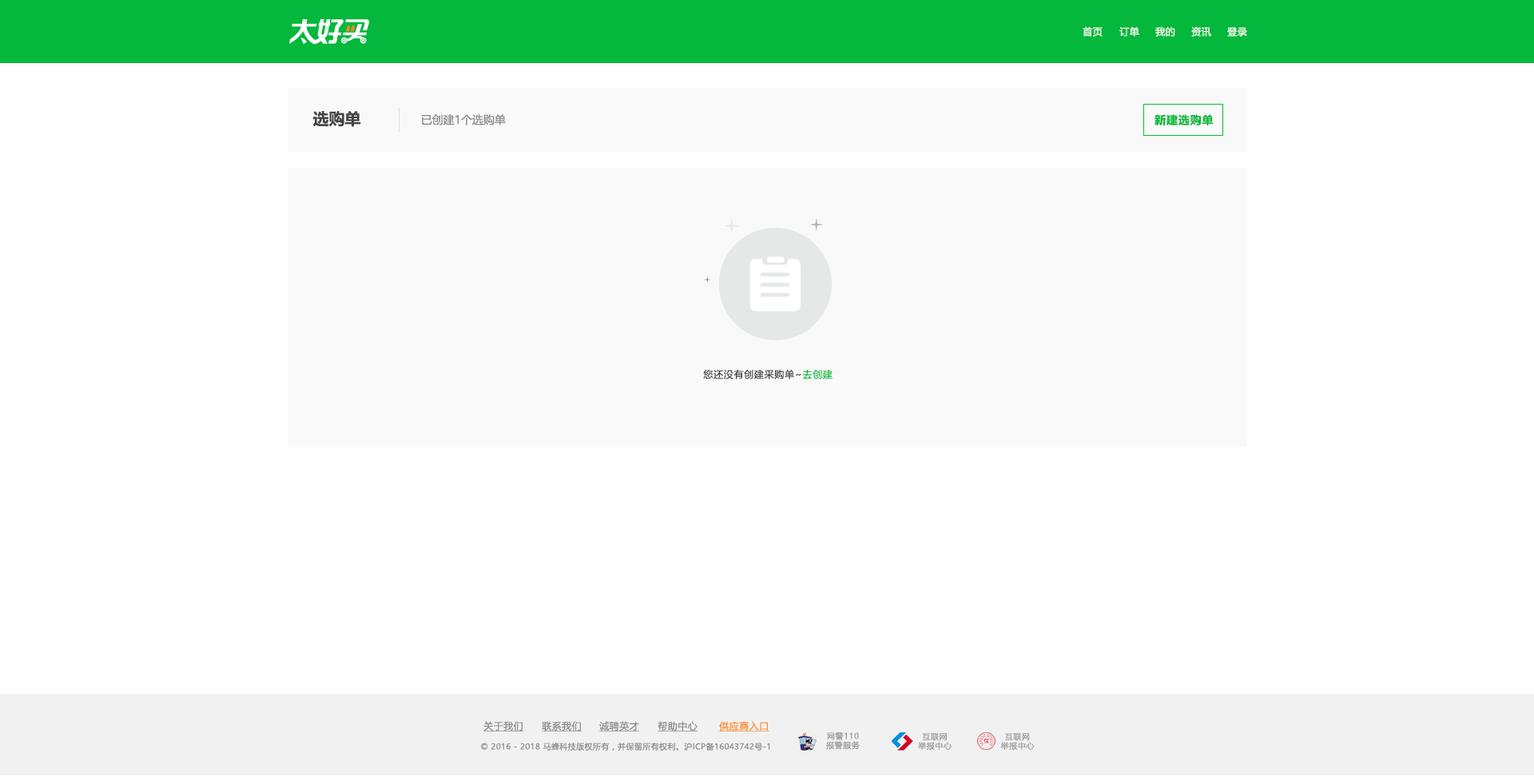
<style>
.page{position:relative;width:1534px;height:777px;background:#ffffff}
.page>*{position:absolute;margin:0}
.t1{font:9.6px "MicrosoftYaHeiUI";letter-spacing:0.04em;color:#ffffff}
.t2{font:16px "MicrosoftYaHeiUI-Bold";color:#444444}
.t3{font:11.2px "MicrosoftYaHeiUI";color:#888888}
.t4{font:11.2px "MicrosoftYaHeiUI-Bold";letter-spacing:0.06em;color:#04b83b}
.t5{font:9.6px "MicrosoftYaHeiUI";letter-spacing:0.06em;color:#444444}
.t6{font:9.6px "MicrosoftYaHeiUI";letter-spacing:0.06em;color:#04b83b}
.t7{font:9.6px "MicrosoftYaHeiUI";letter-spacing:0.04em;color:#8c8c8c;text-decoration:underline}
.t8{font:9.6px "MicrosoftYaHeiUI";letter-spacing:0.04em;color:#ff8b25;text-decoration:underline}
.t9{font:8px/9.3px "MicrosoftYaHei";letter-spacing:0.06em;color:#999999}
.t10{font:8px "MicrosoftYaHeiUI";letter-spacing:0.04em;color:#8c8c8c}
</style>
<div class="page">
<p class="t1" style="left:1083px;top:26px;width:20px;height:11px">首页</p>
<p class="t1" style="left:1119px;top:26px;width:20px;height:11px">订单</p>
<p class="t1" style="left:1155px;top:26px;width:20px;height:11px">我的</p>
<p class="t1" style="left:1191px;top:26px;width:20px;height:11px">资讯</p>
<p class="t1" style="left:1227px;top:27px;width:20px;height:10px">登录</p>
<p class="t2" style="left:313px;top:111px;width:48px;height:16px">选购单</p>
<p class="t3" style="left:421px;top:114px;width:85px;height:11px">已创建1个选购单</p>
<p class="t4" style="left:1154px;top:114px;width:60px;height:12px">新建选购单</p>
<p class="t5" style="left:703px;top:370px;width:129px;height:9px">您还没有创建采购单~<span class="t6">去创建</span></p>
<p class="t7" style="left:483px;top:721px;width:41px;height:11px">关于我们</p>
<p class="t7" style="left:542px;top:721px;width:40px;height:11px">联系我们</p>
<p class="t7" style="left:599px;top:721px;width:41px;height:11px">诚聘英才</p>
<p class="t7" style="left:658px;top:721px;width:40px;height:11px">帮助中心</p>
<p class="t8" style="left:719px;top:721px;width:50px;height:11px">供应商入口</p>
<p class="t9" style="left:826px;top:732px;width:34px;height:18px;text-align:center">网警110<br>报警服务</p>
<p class="t9" style="left:918px;top:733px;width:34px;height:17px;text-align:center">互联网<br>举报中心</p>
<p class="t9" style="left:1000px;top:733px;width:35px;height:17px;text-align:center">互联网<br>举报中心</p>
<p class="t10" style="left:481px;top:742px;width:289px;height:9px">© 2016 - 2018 马蜂科技版权所有，并保留所有权利。沪ICP备16043742号-1</p>
</div>
